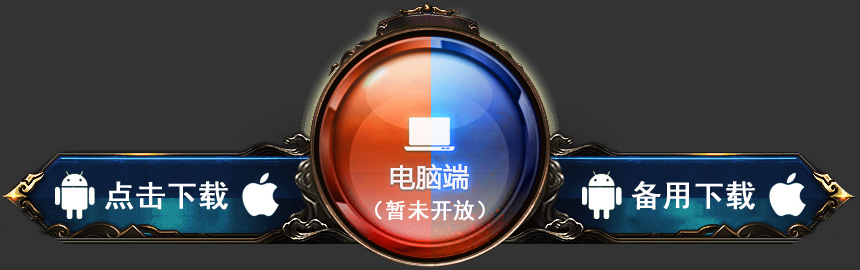
<style>
.page{position:relative;width:860px;height:270px;background:#333333}
.page>*{position:absolute;margin:0}
.t1{font:30.1px "SimHei";letter-spacing:0.02em;color:#ffffff;font-weight:bold}
.t2{font:21.7px "SimHei";letter-spacing:0.02em;color:#ffffff;font-weight:bold}
</style>
<div class="page">
<p class="t1" style="left:105px;top:181px;width:123px;height:29px">点击下载</p>
<p class="t1" style="left:631px;top:181px;width:124px;height:29px">备用下载</p>
<p class="t2" style="left:375px;top:200px;width:110px;height:21px">（暂未开放）</p>
</div>
